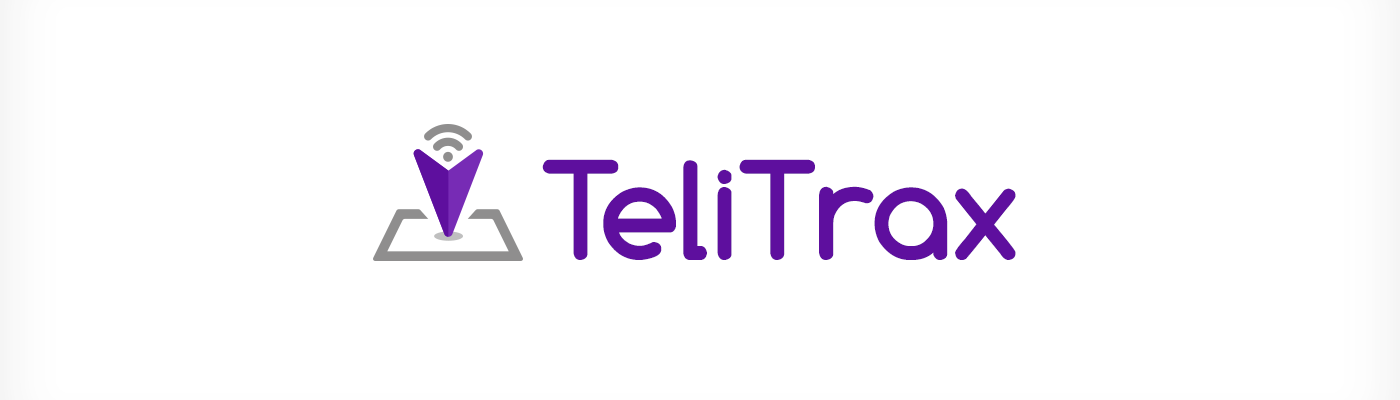
<style>
.page{position:relative;width:1400px;height:400px;background:#ffffff}
.page>*{position:absolute;margin:0}
.t1{font:137px "Comfortaa-Bold";color:#5e0f9e}
</style>
<div class="page">
<p class="t1" style="left:542px;top:159px;width:474px;height:101px">TeliTrax</p>
</div>
